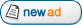
<style>
.page{position:relative;width:83px;height:25px;background:#ffffff}
.page>*{position:absolute;margin:0}
.t1{font:12px "ArialMT";color:#006598;font-weight:bold}
.t2{font:12px "ArialMT";color:#ff9900;font-weight:bold}
</style>
<div class="page">
<p class="t1" style="left:23px;top:9px;width:23px;height:8px">new</p>
<p class="t2" style="left:47px;top:7px;width:14px;height:10px">ad</p>
</div>
